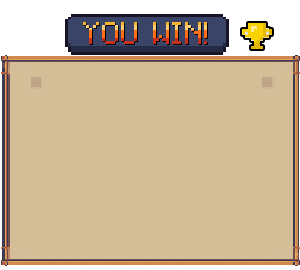
<style>
.page{position:relative;width:300px;height:270px;background:#d4be98}
.page>*{position:absolute;margin:0}
.t1{font:32px "Minecraft-Regular"}
</style>
<div class="page">
<p class="t1" style="left:83px;top:22px;width:124px;height:22px">YOU WIN!</p>
<p class="t1" style="left:84px;top:23px;width:124px;height:22px">YOU WIN!</p>
</div>
